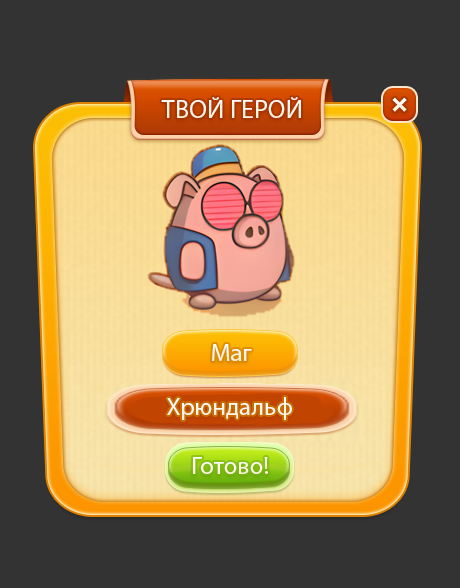
<style>
.page{position:relative;width:460px;height:588px;background:#333333}
.page>*{position:absolute;margin:0}
.t1{font:26px "MyriadPro-Regular";color:#ffffff}
.t2{font:25px "MyriadPro-Regular";color:#fdf6e8}
.t3{font:25px "MyriadPro-Regular";color:#ffffff}
</style>
<div class="page">
<p class="t1" style="left:161px;top:97px;width:140px;height:21px">ТВОЙ ГЕРОЙ</p>
<p class="t2" style="left:212px;top:344px;width:40px;height:17px">Маг</p>
<p class="t3" style="left:167px;top:397px;width:125px;height:23px">Хрюндальф</p>
<p class="t2" style="left:193px;top:457px;width:75px;height:17px">Готово!</p>
</div>
